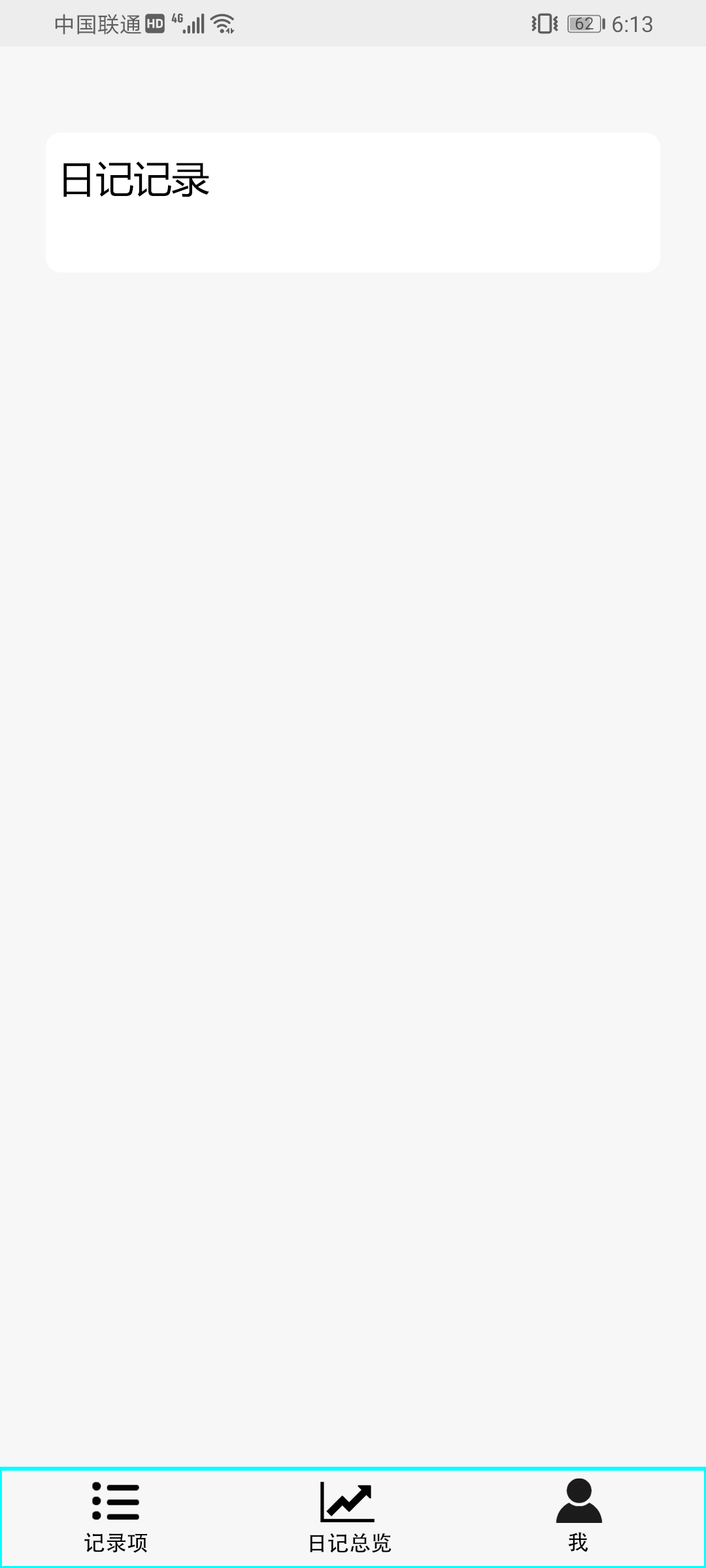
<style>
.page{position:relative;width:706px;height:1568px;background:#f7f7f7}
.page>*{position:absolute;margin:0}
.t1{font:37.9px "MicrosoftYaHei";color:#000000}
.t2{font:21.6px "AdobeHeitiStd-Regular";color:#040403}
</style>
<div class="page">
<p class="t1" style="left:63px;top:161px;width:146px;height:36px">日记记录</p>
<p class="t2" style="left:84px;top:1533px;width:63px;height:20px">记录项</p>
<p class="t2" style="left:310px;top:1533px;width:81px;height:20px">日记总览</p>
<p class="t2" style="left:568px;top:1532px;width:20px;height:20px">我</p>
</div>
